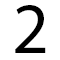
<style>
.page{position:relative;width:60px;height:60px;background:#ffffff}
.page>*{position:absolute;margin:0}
.t1{font:72px "MyriadPro-Regular";color:#000000}
</style>
<div class="page">
<p class="t1" style="left:15px;top:5px;width:31px;height:48px">2</p>
</div>
